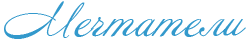
<style>
.page{position:relative;width:250px;height:45px;background:#ffffff}
.page>*{position:absolute;margin:0}
.t1{font:42.6px "Annabelle";color:#3399cc}
</style>
<div class="page">
<p class="t1" style="left:4px;top:1px;width:242px;height:38px">Мечтатели</p>
</div>
